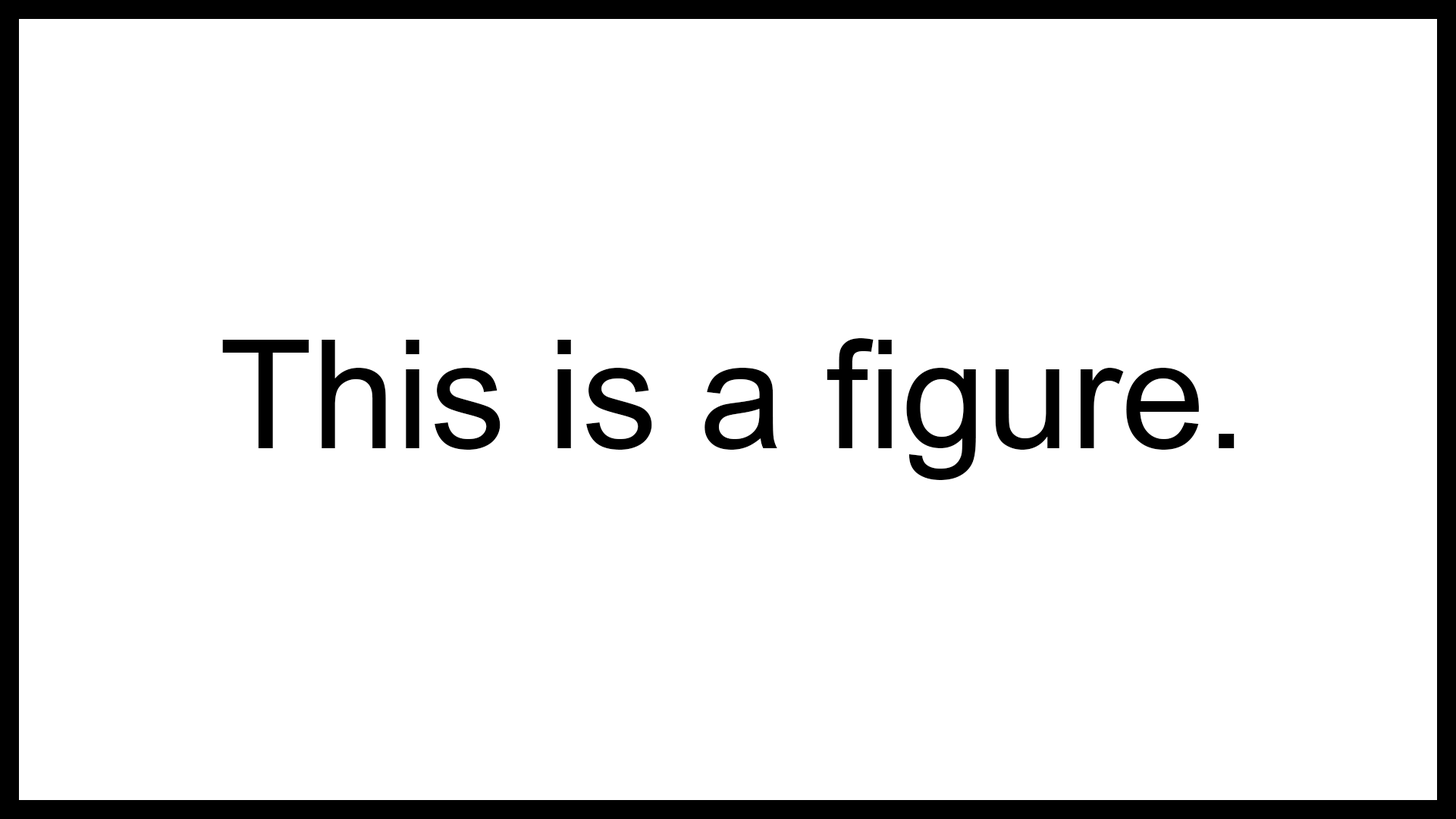
<style>
.page{position:relative;width:1456px;height:819px;background:#ffffff}
.page>*{position:absolute;margin:0}
.t1{font:151.7px "ArialMT";color:#000000}
</style>
<div class="page">
<p class="t1" style="left:222px;top:338px;width:1013px;height:142px">This is a figure.</p>
</div>
